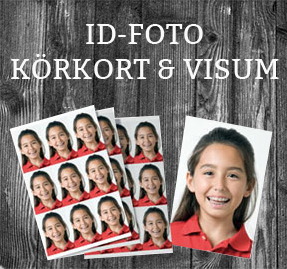
<style>
.page{position:relative;width:287px;height:269px}
.page>*{position:absolute;margin:0}
.t1{font:29.2px "Bitter-Regular";color:#f9f9f9}
</style>
<div class="page">
<p class="t1" style="left:11px;top:24px;width:268px;height:55px;text-align:center">ID-FOTO<br>KÖRKORT &amp; VISUM</p>
</div>
